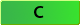
<style>
.page{position:relative;width:80px;height:25px}
.page>*{position:absolute;margin:0}
.t1{font:24px "MyriadPro-Regular";color:#000000}
</style>
<div class="page">
<p class="t1" style="left:34px;top:6px;width:10px;height:12px">c</p>
</div>
